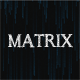
<style>
.page{position:relative;width:80px;height:80px}
.page>*{position:absolute;margin:0}
.t1{font:18px "asongforjennifer";color:#ffffff;text-transform:uppercase}
</style>
<div class="page">
<p class="t1" style="left:8px;top:33px;width:65px;height:15px">Matrix</p>
</div>
